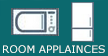
<style>
.page{position:relative;width:108px;height:56px;background:#0c696e}
.page>*{position:absolute;margin:0}
.t1{font:10.3px "Verdana";color:#fdfef9;scale:1.03 1}
</style>
<div class="page">
<p class="t1" style="left:3px;top:45px;width:102px;height:8px">ROOM APPLAINCES</p>
</div>
